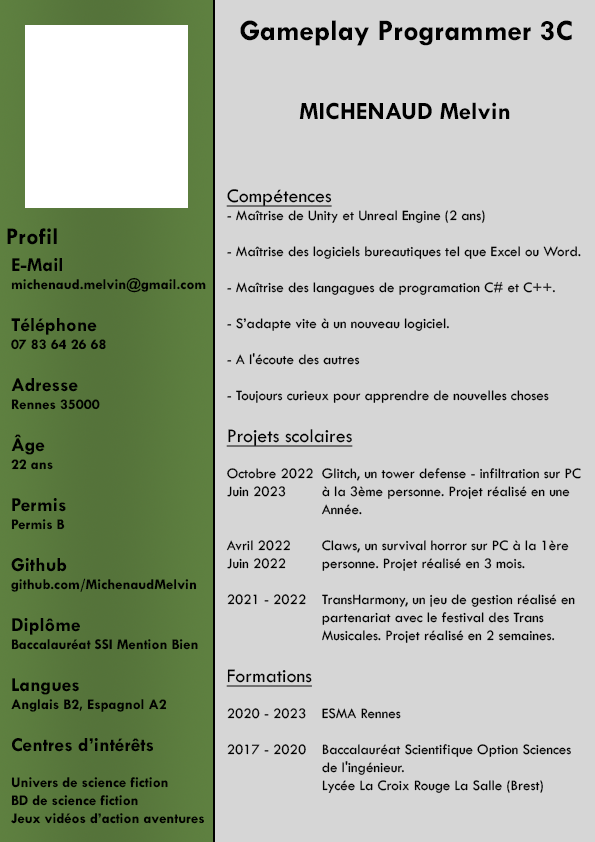
<style>
.page{position:relative;width:595px;height:842px;background:#d6d6d6}
.page>*{position:absolute;margin:0}
.t1{font:30px "TwCenMT-Bold";color:#000000}
.t2{font:25px "TwCenMT-Bold";color:#000000}
.t3{font:15px "TwCenMT-Regular";color:#000000}
.t4{font:20px "TwCenMT-Regular";color:#000000;text-decoration:underline}
.t5{font:24px "TwCenMT-Bold";color:#000000}
.t6{font:15px "TwCenMT-Bold";color:#000000}
.t7{font:20px "TwCenMT-Bold";color:#000000}
.t8{font:20px "TwCenMT-Regular";color:#000000}
</style>
<div class="page">
<p class="t1" style="left:240px;top:20px;width:332px;height:26px">Gameplay Programmer 3C</p>
<p class="t2" style="left:299px;top:102px;width:211px;height:18px">MICHENAUD Melvin</p>
<p class="t3" style="left:226px;top:189px;width:355px;height:604px"><span class="t4">Compétences<br></span>- Maîtrise de Unity et Unreal Engine (2 ans)<br><br>- Maîtrise des logiciels bureautiques tel que Excel ou Word.<br><br>- Maîtrise des langagues de programation C# et C++.<br><br>- S’adapte vite à un nouveau logiciel.<br><br>- A l'écoute des autres<br><br>- Toujours curieux pour apprendre de nouvelles choses<br><br><span class="t4">Projets scolaires<br></span><br>           Glitch, un tower defense - infiltration sur PC <br>           à la 3ème personne. Projet réalisé en une <br>           Année.<br><br>           Claws, un survival horror sur PC à la 1ère <br>           personne. Projet réalisé en 3 mois.<br><br>           TransHarmony, un jeu de gestion réalisé en <br>           partenariat avec le festival des Trans <br>           Musicales. Projet réalisé en 2 semaines.<br><br><span class="t4">Formations<br></span><br>           ESMA Rennes <br><br>           Baccalauréat Scientifique Option Sciences <br>           de l'ingénieur. <br>           Lycée La Croix Rouge La Salle (Brest)</p>
<p class="t5" style="left:7px;top:228px;width:50px;height:17px">Profil</p>
<p class="t6" style="left:11px;top:258px;width:195px;height:566px"><span class="t7">E-Mail<br></span>michenaud.melvin@gmail.com<br><br><span class="t7">Téléphone<br></span>07 83 64 26 68<br><br><span class="t7">Adresse<br></span>Rennes 35000<br><br><span class="t7">Âge<br></span>22 ans<br><br><span class="t7">Permis<br></span>Permis B<br><br><span class="t7">Github<br></span>github.com/MichenaudMelvin<br><br><span class="t7">Diplôme<br></span>Baccalauréat SSI Mention Bien<br><br><span class="t7">Langues<br></span>Anglais B2, Espagnol A2<br><br><span class="t7">Centres d’intérêts<br></span><br>Univers de science fiction<br>BD de science fiction<br>Jeux vidéos d’action aventures<br><br>6 années de Tennis</p>
<p class="t3" style="left:226px;top:468px;width:87px;height:287px"><span class="t8"><br><br><br><br><br><br><br><br><br><br><br><br><br><br></span><br>Octobre 2022<br>Juin 2023<br><br><br>Avril 2022<br>Juin 2022<br><br>2021 - 2022<br><br><br><br><br><br>2020 - 2023<br><br>2017 - 2020</p>
</div>
